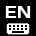
<style>
.page{position:relative;width:36px;height:36px;background:#000000}
.page>*{position:absolute;margin:0}
.t1{font:16px "Swiss721BT-BoldExtended";color:#ffffff}
</style>
<div class="page">
<p class="t1" style="left:5px;top:6px;width:26px;height:12px">EN</p>
</div>
